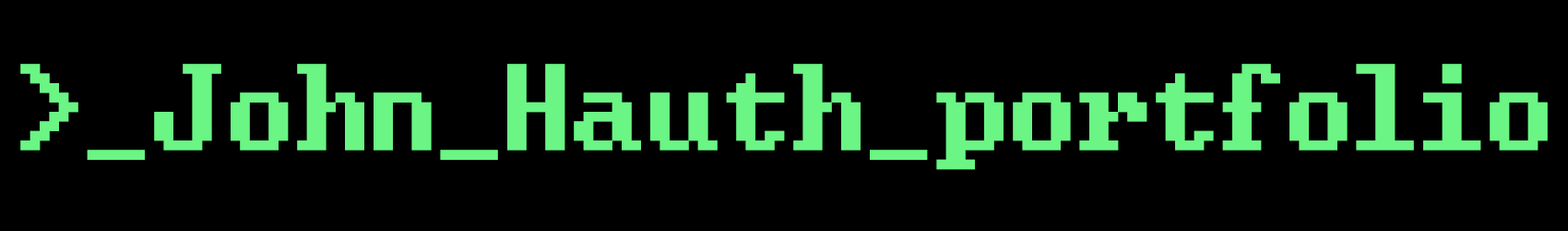
<style>
.page{position:relative;width:1568px;height:231px;background:#000000}
.page>*{position:absolute;margin:0}
.t1{font:152.7px "Windows-Command-Prompt";color:#6af584}
</style>
<div class="page">
<p class="t1" style="left:20px;top:64px;width:1528px;height:106px">&gt;_John_Hauth_portfolio</p>
</div>
